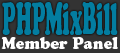
<style>
.page{position:relative;width:120px;height:53px;background:#037da0}
.page>*{position:absolute;margin:0}
.t1{font:44.7px "CooperBlackStd";color:#037da0;scale:0.42 1}
.t2{font:16px "CooperBlackStd";color:#ffffff;scale:0.97 1}
</style>
<div class="page">
<p class="t1" style="left:2px;top:2px;width:116px;height:33px">PHPMixBill</p>
<p class="t2" style="left:1px;top:37px;width:117px;height:12px">Member Panel</p>
</div>
